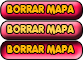
<style>
.page{position:relative;width:83px;height:60px}
.page>*{position:absolute;margin:0}
.t1{font:10.2px "Valken";color:#ffb607;scale:0.9 1}
.t2{font:10.2px "Valken";color:#ffd14e;scale:0.9 1}
</style>
<div class="page">
<p class="t1" style="left:7px;top:5px;width:67px;height:9px">BORRAR MAPA</p>
<p class="t2" style="left:7px;top:25px;width:67px;height:9px">BORRAR MAPA</p>
<p class="t1" style="left:7px;top:45px;width:67px;height:9px">BORRAR MAPA</p>
</div>
